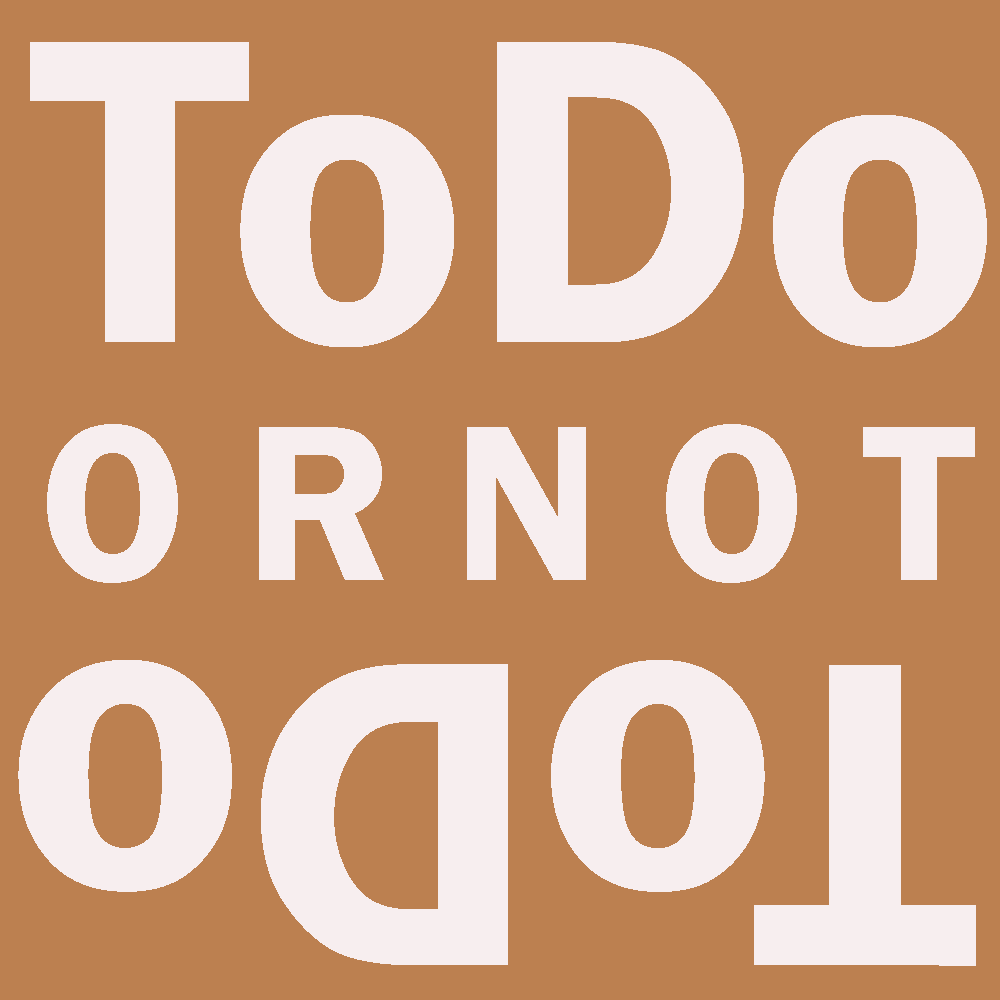
<style>
.page{position:relative;width:1000px;height:1000px;background:#bc8050}
.page>*{position:absolute;margin:0}
.t1{font:450px "FranklinGothic-Demi";color:#f7eeef}
.t2{font:230px "FranklinGothic-Demi";color:#f7eeef}
</style>
<div class="page">
<p class="t1" style="left:30px;top:42px;width:957px;height:305px">ToDo</p>
<p class="t2" style="left:47px;top:424px;width:928px;height:159px">O R N O T</p>
<p class="t1" style="left:18px;top:660px;width:958px;height:306px;rotate:-180deg">ToDo</p>
</div>
